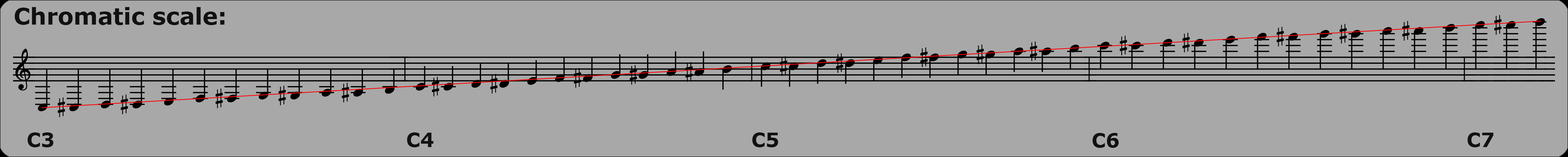
<style>
.page{position:relative;width:1568px;height:157px;background:#a8a8a8}
.page>*{position:absolute;margin:0}
.t1{font:22.9px "Verdana-Bold";color:#111111}
.t2{font:19.6px "Verdana-Bold";color:#111111}
</style>
<div class="page">
<p class="t1" style="left:15px;top:7px;width:209px;height:18px">Chromatic scale:</p>
<p class="t2" style="left:27px;top:132px;width:27px;height:15px">C3</p>
<p class="t2" style="left:407px;top:132px;width:27px;height:15px">C4</p>
<p class="t2" style="left:752px;top:132px;width:26px;height:15px">C5</p>
<p class="t2" style="left:1092px;top:133px;width:27px;height:15px">C6</p>
<p class="t2" style="left:1467px;top:132px;width:27px;height:15px">C7</p>
</div>
